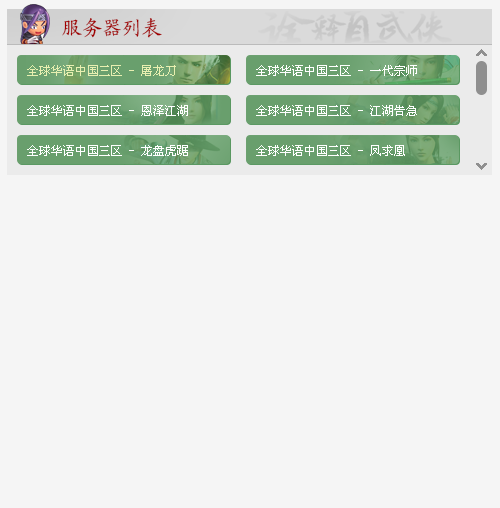
<style>
.page{position:relative;width:500px;height:508px;background:#f5f5f5}
.page>*{position:absolute;margin:0}
.t1{font:20px "KaiTi_GB2312";color:#a10000}
.t2{font:12px "SimSun";color:#e8efb1}
.t3{font:12px "SimSun";color:#ffffff}
</style>
<div class="page">
<p class="t1" style="left:62px;top:18px;width:100px;height:20px">服务器列表</p>
<p class="t2" style="left:27px;top:65px;width:149px;height:11px">全球华语中国三区 - 屠龙刀</p>
<p class="t3" style="left:256px;top:65px;width:161px;height:11px">全球华语中国三区 - 一代宗师</p>
<p class="t3" style="left:27px;top:105px;width:161px;height:11px">全球华语中国三区 - 恩泽江湖</p>
<p class="t3" style="left:256px;top:105px;width:161px;height:11px">全球华语中国三区 - 江湖告急</p>
<p class="t3" style="left:27px;top:145px;width:161px;height:11px">全球华语中国三区 - 龙盘虎踞</p>
<p class="t3" style="left:256px;top:145px;width:149px;height:11px">全球华语中国三区 - 凤求凰</p>
</div>
